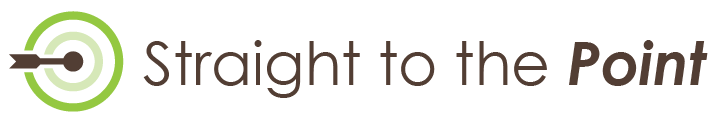
<style>
.page{position:relative;width:720px;height:120px;background:#ffffff}
.page>*{position:absolute;margin:0}
.t1{font:60px "CenturyGothic";color:#523e34}
.t2{font:60px "CenturyGothic-BoldItalic";color:#523e34}
</style>
<div class="page">
<p class="t1" style="left:143px;top:40px;width:565px;height:58px">Straight to the <span class="t2">Point</span></p>
</div>
